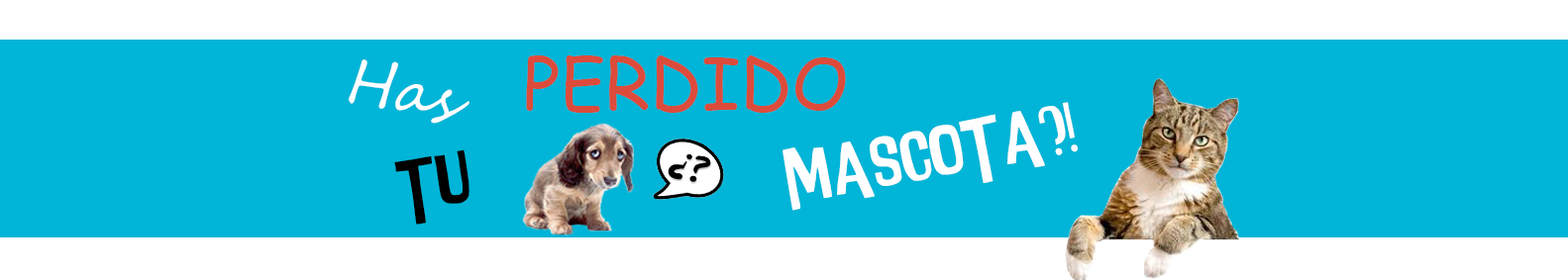
<style>
.page{position:relative;width:1568px;height:280px;background:#00b5d7}
.page>*{position:absolute;margin:0}
.t1{font:59.4px "SegoeScript";color:#ffffff}
.t2{font:71.3px "ComicSansMS";color:#dd4b3b}
.t3{font:71.3px "IntensaFuente";color:#fefefe}
.t4{font:71.3px "IntensaFuente";color:#000000}
</style>
<div class="page">
<p class="t1" style="left:349px;top:59px;width:121px;height:65px;rotate:11deg">Has</p>
<p class="t2" style="left:526px;top:55px;width:320px;height:58px">PERDIDO</p>
<p class="t3" style="left:783px;top:102px;width:295px;height:109px;rotate:-10deg">MASCOTA?!</p>
<p class="t4" style="left:394px;top:150px;width:76px;height:75px;rotate:-8deg">TU</p>
</div>
